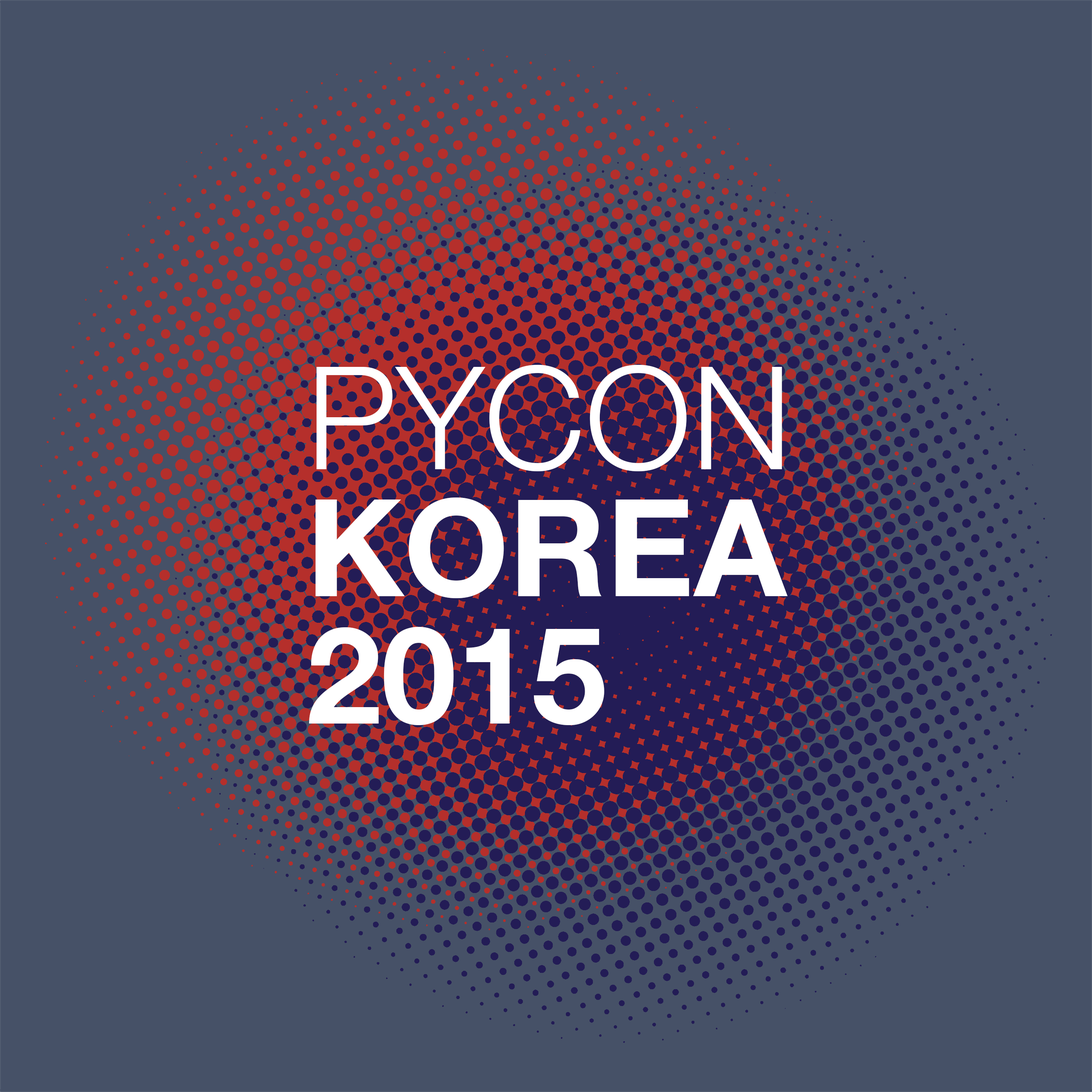
<style>
.page{position:relative;width:1092px;height:1092px;background:#465167}
.page>*{position:absolute;margin:0}
.t1{font:135.1px/127.1px "HelveticaNeue-Bold";color:#ffffff}
.t2{font:143.3px/127.1px "HelveticaNeue-Light";color:#ffffff}
</style>
<div class="page">
<p class="t1" style="left:309px;top:365px;width:479px;height:360px"><span class="t2">PYCON<br></span>KOREA<br>2015</p>
</div>
